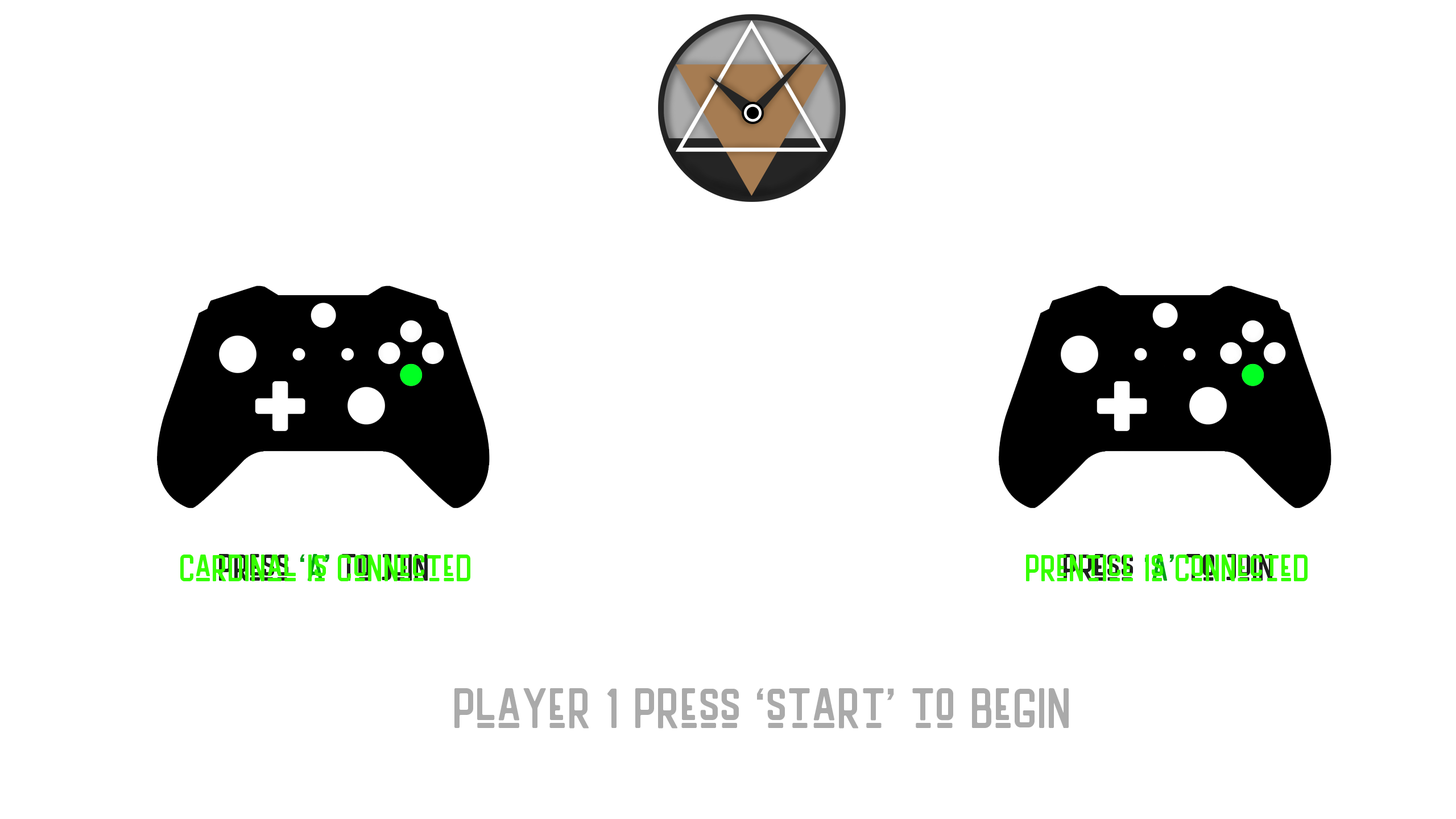
<style>
.page{position:relative;width:1456px;height:819px;background:#ffffff}
.page>*{position:absolute;margin:0}
.t1{font:37.9px "HANDLERRegular";letter-spacing:0.025em;color:#36ff00}
.t2{font:37.9px "HANDLERRegular";letter-spacing:0.025em}
.t3{font:56.9px "HANDLERRegular";letter-spacing:0.025em;color:#aaaaaa}
</style>
<div class="page">
<p class="t1" style="left:180px;top:555px;width:290px;height:26px">Cardinal Is Connected</p>
<p class="t2" style="left:219px;top:554px;width:209px;height:27px">Press ‘A’ To Join</p>
<p class="t1" style="left:1026px;top:555px;width:282px;height:26px">Prentice Is Connected</p>
<p class="t2" style="left:1064px;top:554px;width:208px;height:27px">Press ‘A’ To Join</p>
<p class="t3" style="left:454px;top:688px;width:615px;height:41px">Player 1 Press ‘start’ to Begin</p>
</div>
